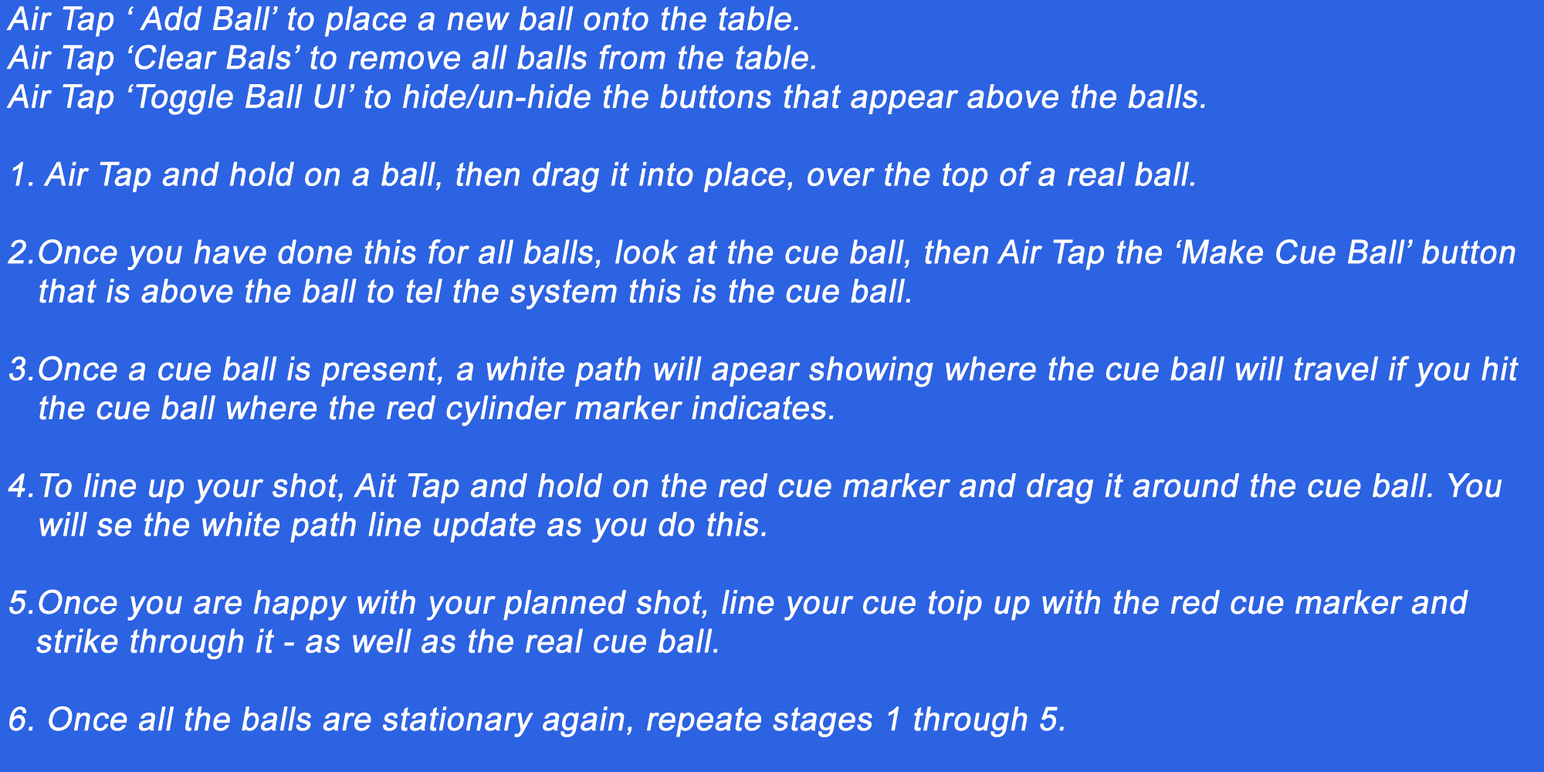
<style>
.page{position:relative;width:1544px;height:772px;background:#2b63e2}
.page>*{position:absolute;margin:0}
.t1{font:32.4px "ArialMT";color:#ffffff;font-weight:bold;font-style:italic}
</style>
<div class="page">
<p class="t1" style="left:6px;top:6px;width:1513px;height:731px">Air Tap ‘ Add Ball’ to place a new ball onto the table.<br>Air Tap ‘Clear Bals’ to remove all balls from the table.<br>Air Tap ‘Toggle Ball UI’ to hide/un-hide the buttons that appear above the balls.<br><br>1. Air Tap and hold on a ball, then drag it into place, over the top of a real ball.<br><br>2.Once you have done this for all balls, look at the cue ball, then Air Tap the ‘Make Cue Ball’ button       that is above the ball to tel the system this is the cue ball.<br><br>3.Once a cue ball is present, a white path will apear showing where the cue ball will travel if you hit        the cue ball where the red cylinder marker indicates.<br><br>4.To line up your shot, Ait Tap and hold on the red cue marker and drag it around the cue ball. You          will se the white path line update as you do this.<br><br>5.Once you are happy with your planned shot, line your cue toip up with the red cue marker and            strike through it - as well as the real cue ball.<br><br>6. Once all the balls are stationary again, repeate stages 1 through 5.</p>
</div>
